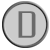
<style>
.page{position:relative;width:50px;height:50px;background:#cccccc}
.page>*{position:absolute;margin:0}
.t1{font:30px "TVpl";letter-spacing:0.05em;color:#6a6a6a}
</style>
<div class="page">
<p class="t1" style="left:18px;top:11px;width:18px;height:27px">D</p>
</div>
